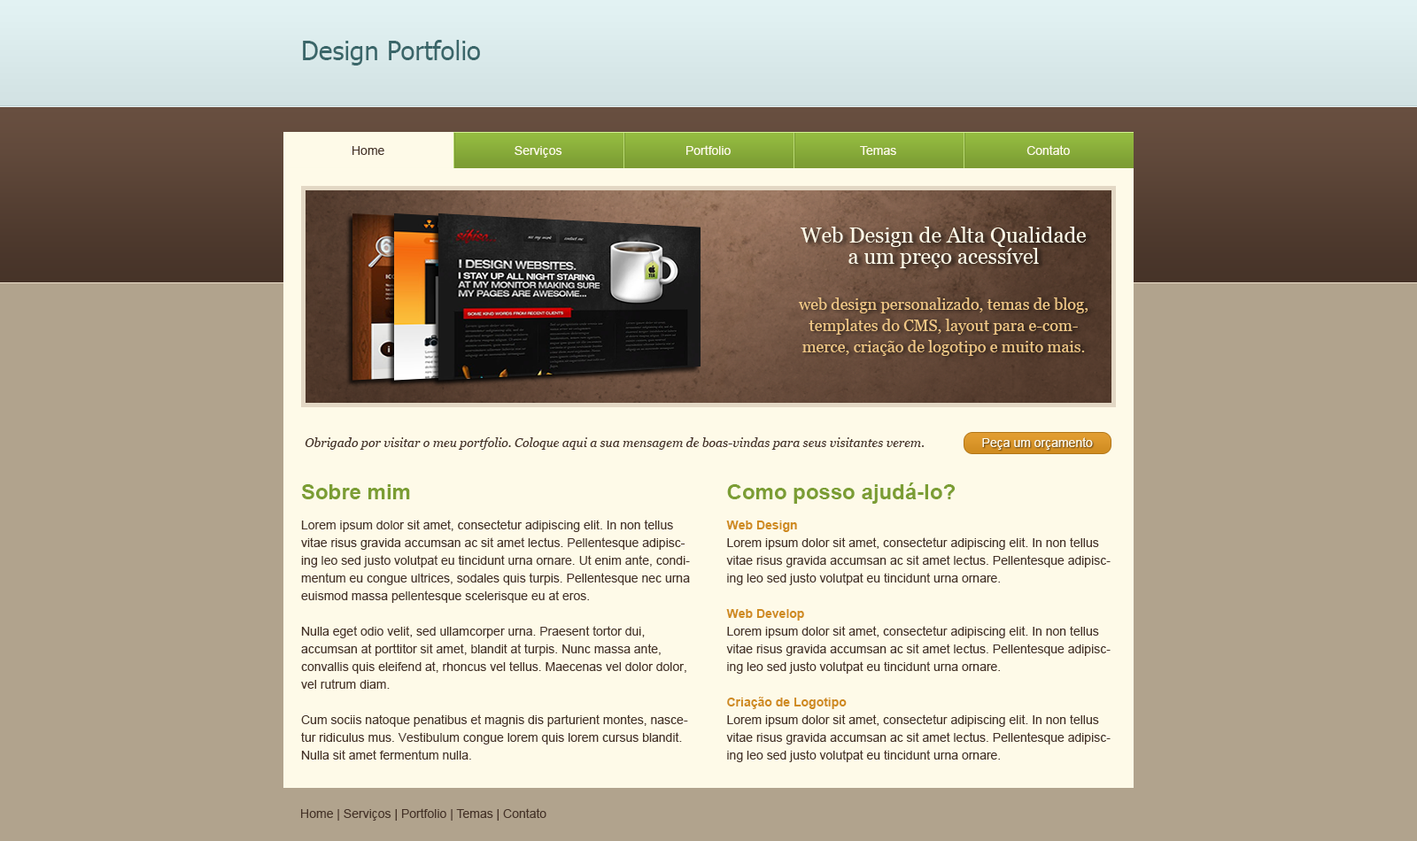
<style>
.page{position:relative;width:1417px;height:841px;background:#b1a38d}
.page>*{position:absolute;margin:0}
.t1{font:26.6px "Tahoma";color:#3a6669}
.t2{font:12.4px "ArialMT";color:#463328}
.t3{font:12.4px "ArialMT";color:#fefae8}
.t4{font:21.3px/21.3px "Georgia";color:#fefae8}
.t5{font:15.9px/21.3px "Georgia";color:#f0c786}
.t6{font:12.4px "Georgia-Italic";color:#463328}
.t7{font:12.4px/17.7px "ArialMT";color:#463328}
.t8{font:21.3px/12.4px "Arial-BoldMT";color:#7b9d33}
.t9{font:12.4px/17.7px "Arial-BoldMT";color:#cf8b1f}
</style>
<div class="page">
<p class="t1" style="left:303px;top:40px;width:177px;height:26px">Design Portfolio</p>
<p class="t2" style="left:353px;top:146px;width:31px;height:9px">Home</p>
<p class="t3" style="left:515px;top:146px;width:47px;height:12px">Serviços</p>
<p class="t3" style="left:686px;top:145px;width:45px;height:10px">Portfolio</p>
<p class="t3" style="left:860px;top:146px;width:36px;height:9px">Temas</p>
<p class="t3" style="left:1027px;top:145px;width:43px;height:10px">Contato</p>
<p class="t4" style="left:801px;top:227px;width:285px;height:41px;text-align:center">Web Design de Alta Qualidade a um preço acessível</p>
<p class="t5" style="left:798px;top:298px;width:291px;height:58px;text-align:center">web design personalizado, temas de blog, templates do CMS, layout para e-commerce, criação de logotipo e muito mais.</p>
<p class="t6" style="left:305px;top:438px;width:620px;height:12px">Obrigado por visitar o meu portfolio. Coloque aqui a sua mensagem de boas-vindas para seus visitantes verem.</p>
<p class="t3" style="left:982px;top:438px;width:111px;height:12px">Peça um orçamento</p>
<p class="t7" style="left:301px;top:484px;width:389px;height:276px"><span class="t8">Sobre mim<br><br></span>Lorem ipsum dolor sit amet, consectetur adipiscing elit. In non tellus vitae risus gravida accumsan ac sit amet lectus. Pellentesque adipiscing leo sed justo volutpat eu tincidunt urna ornare. Ut enim ante, condimentum eu congue ultrices, sodales quis turpis. Pellentesque nec urna euismod massa pellentesque scelerisque eu at eros. <br><br>Nulla eget odio velit, sed ullamcorper urna. Praesent tortor dui, accumsan at porttitor sit amet, blandit at turpis. Nunc massa ante, convallis quis eleifend at, rhoncus vel tellus. Maecenas vel dolor dolor, vel rutrum diam. <br><br>Cum sociis natoque penatibus et magnis dis parturient montes, nascetur ridiculus mus. Vestibulum congue lorem quis lorem cursus blandit. Nulla sit amet fermentum nulla.</p>
<p class="t7" style="left:726px;top:483px;width:385px;height:280px"><span class="t8">Como posso ajudá-lo?<br><br></span><span class="t9">Web Design<br></span>Lorem ipsum dolor sit amet, consectetur adipiscing elit. In non tellus vitae risus gravida accumsan ac sit amet lectus. Pellentesque adipiscing leo sed justo volutpat eu tincidunt urna ornare.<br><br><span class="t9">Web Develop<br></span>Lorem ipsum dolor sit amet, consectetur adipiscing elit. In non tellus vitae risus gravida accumsan ac sit amet lectus. Pellentesque adipiscing leo sed justo volutpat eu tincidunt urna ornare.<br><br><span class="t9">Criação de Logotipo<br></span>Lorem ipsum dolor sit amet, consectetur adipiscing elit. In non tellus vitae risus gravida accumsan ac sit amet lectus. Pellentesque adipiscing leo sed justo volutpat eu tincidunt urna ornare.</p>
<p class="t2" style="left:301px;top:809px;width:245px;height:12px">Home | Serviços | Portfolio | Temas | Contato</p>
</div>
